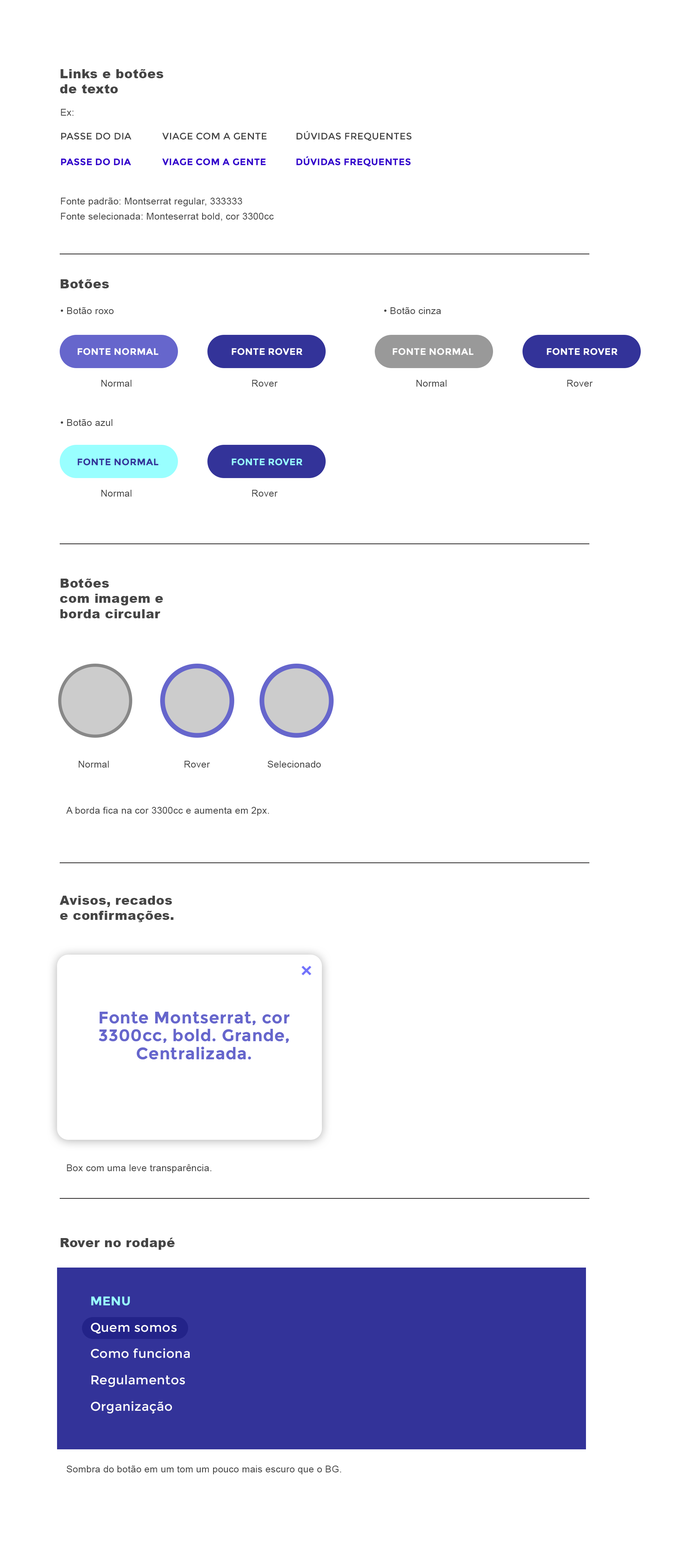
<style>
.page{position:relative;width:691px;height:1568px;background:#ffffff}
.page>*{position:absolute;margin:0}
.t1{font:12.6px/15.3px "Arial-Black";letter-spacing:0.02em;color:#454545}
.t2{font:9.4px "ArialMT";letter-spacing:0.02em;color:#454545}
.t3{font:9.4px "Montserrat-Regular";letter-spacing:0.02em;color:#454545}
.t4{font:9.4px "Montserrat-Bold";letter-spacing:0.02em;color:#3300cc}
.t5{font:9.4px/15.3px "ArialMT";letter-spacing:0.02em;color:#454545}
.t6{font:12.6px "Arial-Black";letter-spacing:0.02em;color:#454545}
.t7{font:9.4px "Montserrat-Bold";letter-spacing:0.02em;color:#ffffff}
.t8{font:9.4px "Montserrat-Bold";letter-spacing:0.02em;color:#333399}
.t9{font:9.4px "Montserrat-Bold";letter-spacing:0.02em;color:#99ffff}
.t10{font:16.7px/18.1px "Montserrat-Bold";letter-spacing:0.02em;color:#6666cc}
.t11{font:12.6px/26.4px "Montserrat-Regular";letter-spacing:0.02em;color:#ffffff}
.t12{font:12.6px/26.4px "Montserrat-Bold";letter-spacing:0.02em;color:#99ffff}
</style>
<div class="page">
<p class="t1" style="left:60px;top:69px;width:103px;height:24px">Links e botões <br>de texto</p>
<p class="t2" style="left:61px;top:109px;width:13px;height:7px">Ex:</p>
<p class="t3" style="left:61px;top:133px;width:71px;height:7px">PASSE DO DIA</p>
<p class="t3" style="left:162px;top:133px;width:105px;height:7px">VIAGE COM A GENTE</p>
<p class="t3" style="left:297px;top:131px;width:115px;height:10px">DÚVIDAS FREQUENTES</p>
<p class="t4" style="left:61px;top:158px;width:70px;height:8px">PASSE DO DIA</p>
<p class="t4" style="left:162px;top:158px;width:104px;height:8px">VIAGE COM A GENTE</p>
<p class="t4" style="left:296px;top:156px;width:115px;height:11px">DÚVIDAS FREQUENTES</p>
<p class="t5" style="left:61px;top:198px;width:213px;height:23px">Fonte padrão: Montserrat regular, 333333<br>Fonte selecionada: Monteserrat bold, cor 3300cc</p>
<p class="t6" style="left:60px;top:279px;width:49px;height:9px">Botões</p>
<p class="t2" style="left:60px;top:307px;width:54px;height:7px">• Botão roxo</p>
<p class="t2" style="left:384px;top:307px;width:57px;height:7px">• Botão cinza</p>
<p class="t7" style="left:77px;top:348px;width:81px;height:7px">FONTE NORMAL</p>
<p class="t7" style="left:232px;top:348px;width:71px;height:7px">FONTE ROVER</p>
<p class="t7" style="left:393px;top:348px;width:81px;height:7px">FONTE NORMAL</p>
<p class="t7" style="left:547px;top:348px;width:71px;height:7px">FONTE ROVER</p>
<p class="t2" style="left:101px;top:380px;width:31px;height:7px">Normal</p>
<p class="t2" style="left:252px;top:380px;width:26px;height:7px">Rover</p>
<p class="t2" style="left:416px;top:380px;width:31px;height:7px">Normal</p>
<p class="t2" style="left:567px;top:380px;width:26px;height:7px">Rover</p>
<p class="t2" style="left:60px;top:419px;width:53px;height:7px">• Botão azul</p>
<p class="t8" style="left:77px;top:458px;width:81px;height:8px">FONTE NORMAL</p>
<p class="t9" style="left:232px;top:458px;width:71px;height:8px">FONTE ROVER</p>
<p class="t2" style="left:101px;top:490px;width:31px;height:7px">Normal</p>
<p class="t2" style="left:252px;top:490px;width:26px;height:7px">Rover</p>
<p class="t1" style="left:60px;top:579px;width:103px;height:39px">Botões <br>com imagem e <br>borda circular</p>
<p class="t2" style="left:79px;top:761px;width:30px;height:7px">Normal</p>
<p class="t2" style="left:184px;top:761px;width:26px;height:7px">Rover</p>
<p class="t2" style="left:268px;top:761px;width:53px;height:7px">Selecionado</p>
<p class="t2" style="left:66px;top:807px;width:203px;height:9px">A borda fica na cor 3300cc e aumenta em 2px.</p>
<p class="t1" style="left:60px;top:896px;width:113px;height:26px">Avisos, recados <br>e confirmações.</p>
<p class="t10" style="left:99px;top:1012px;width:190px;height:48px;text-align:center">Fonte Montserrat, cor 3300cc, bold. Grande, Centralizada.</p>
<p class="t2" style="left:67px;top:1164px;width:145px;height:9px">Box com uma leve transparência.</p>
<p class="t6" style="left:60px;top:1238px;width:115px;height:12px">Rover no rodapé</p>
<p class="t11" style="left:91px;top:1296px;width:99px;height:117px"><span class="t12">MENU</span><br>Quem somos<br>Como funciona<br>Regulamentos<br>Organização</p>
<p class="t2" style="left:67px;top:1466px;width:274px;height:8px">Sombra do botão em um tom um pouco mais escuro que o BG.</p>
</div>
